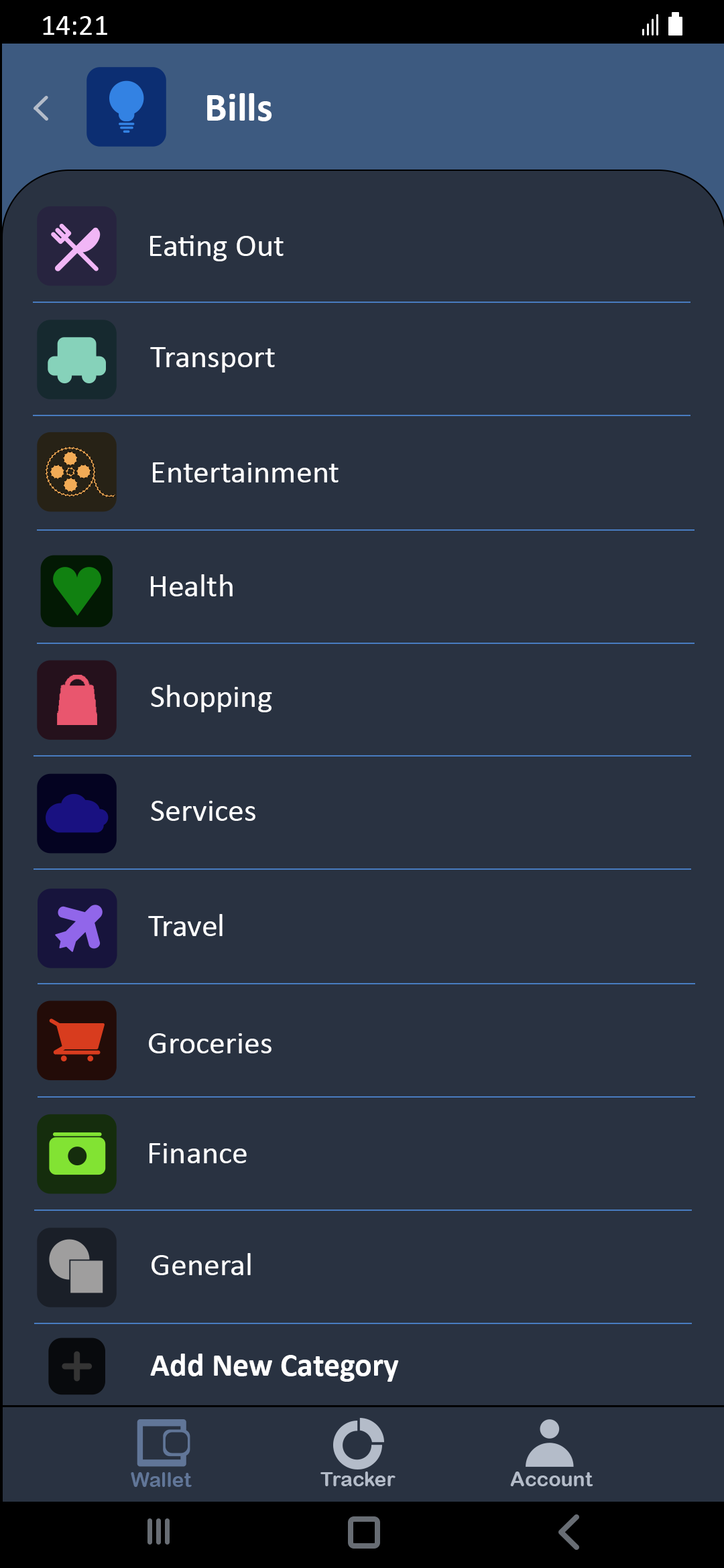
<style>
.page{position:relative;width:724px;height:1568px;background:#293241}
.page>*{position:absolute;margin:0}
.t1{font:29.5px "Calibri";color:#ffffff}
.t2{font:40.2px "Calibri-Bold";color:#ffffff}
.t3{font:32.2px "Calibri";color:#ffffff}
.t4{font:32.2px "Calibri-Bold";color:#ffffff}
.t5{font:20.1px "ArialRoundedMTBold";color:#617698}
.t6{font:20.1px "ArialRoundedMTBold";color:#b4bcc9}
</style>
<div class="page">
<p class="t1" style="left:43px;top:16px;width:64px;height:19px">14:21</p>
<p class="t2" style="left:207px;top:93px;width:65px;height:28px">Bills</p>
<p class="t3" style="left:150px;top:235px;width:133px;height:26px">Eating Out</p>
<p class="t3" style="left:150px;top:347px;width:125px;height:26px">Transport</p>
<p class="t3" style="left:153px;top:462px;width:185px;height:20px">Entertainment</p>
<p class="t3" style="left:151px;top:574px;width:82px;height:22px">Health</p>
<p class="t3" style="left:151px;top:685px;width:121px;height:27px">Shopping</p>
<p class="t3" style="left:151px;top:801px;width:104px;height:20px">Services</p>
<p class="t3" style="left:148px;top:914px;width:74px;height:22px">Travel</p>
<p class="t3" style="left:149px;top:1033px;width:122px;height:20px">Groceries</p>
<p class="t3" style="left:149px;top:1143px;width:98px;height:20px">Finance</p>
<p class="t3" style="left:151px;top:1253px;width:100px;height:22px">General</p>
<p class="t4" style="left:150px;top:1354px;width:249px;height:28px">Add New Category</p>
<p class="t5" style="left:131px;top:1472px;width:61px;height:15px">Wallet</p>
<p class="t6" style="left:320px;top:1472px;width:75px;height:14px">Tracker</p>
<p class="t6" style="left:510px;top:1472px;width:83px;height:14px">Account</p>
</div>
